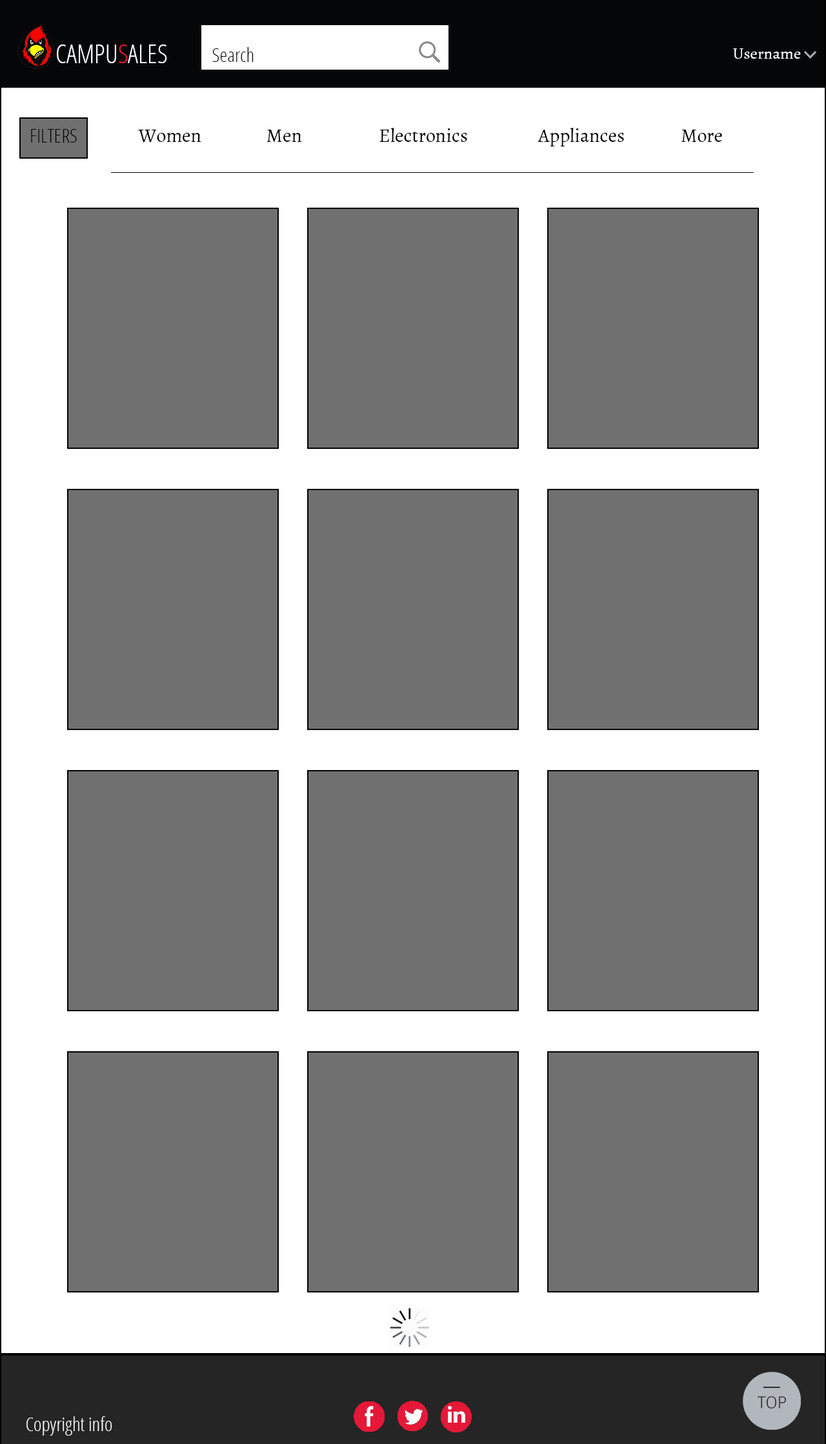
<style>
.page{position:relative;width:826px;height:1444px;background:#707070}
.page>*{position:absolute;margin:0}
.t1{font:25.8px "OpenSans-CondensedLight";color:#fefeff;text-transform:uppercase}
.t2{font:25.8px "OpenSans-CondensedLight";color:#e51837;text-transform:uppercase}
.t3{font:19.4px "OpenSans-CondensedLight";color:#050608}
.t4{font:16.1px "Alegreya-Regular";color:#ffffff}
.t5{font:19.4px "OpenSans-CondensedLight";color:#000000;text-transform:uppercase}
.t6{font:19.4px "Alegreya-Regular";color:#000000}
.t7{font:19.4px "OpenSans-CondensedLight";color:#ffffff}
</style>
<div class="page">
<p class="t1" style="left:57px;top:45px;width:110px;height:18px">Campu<span class="t2">s</span>ales</p>
<p class="t3" style="left:212px;top:47px;width:41px;height:15px">Search</p>
<p class="t4" style="left:733px;top:48px;width:67px;height:11px">Username</p>
<p class="t5" style="left:31px;top:129px;width:46px;height:14px">Filters</p>
<p class="t6" style="left:138px;top:129px;width:63px;height:14px">Women</p>
<p class="t6" style="left:266px;top:130px;width:36px;height:13px">Men</p>
<p class="t6" style="left:379px;top:128px;width:88px;height:15px">Electronics</p>
<p class="t6" style="left:537px;top:128px;width:87px;height:18px">Appliances</p>
<p class="t6" style="left:681px;top:130px;width:41px;height:12px">More</p>
<p class="t7" style="left:26px;top:1417px;width:86px;height:19px">Copyright info</p>
</div>
